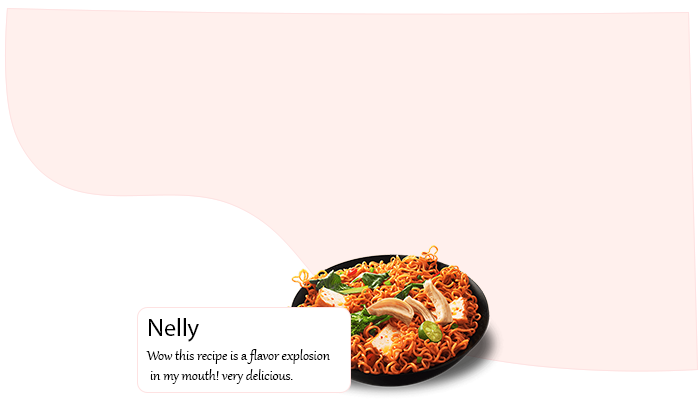
<style>
.page{position:relative;width:700px;height:400px;background:#fff0ed}
.page>*{position:absolute;margin:0}
.t1{font:25px "MyriadPro-Regular";color:#000000}
.t2{font:16.7px "Gabriola";color:#000000}
</style>
<div class="page">
<p class="t1" style="left:149px;top:318px;width:50px;height:24px">Nelly</p>
<p class="t2" style="left:146px;top:349px;width:184px;height:35px">Wow this recipe is a flavor explosion<br> in my mouth! very delicious.</p>
</div>
